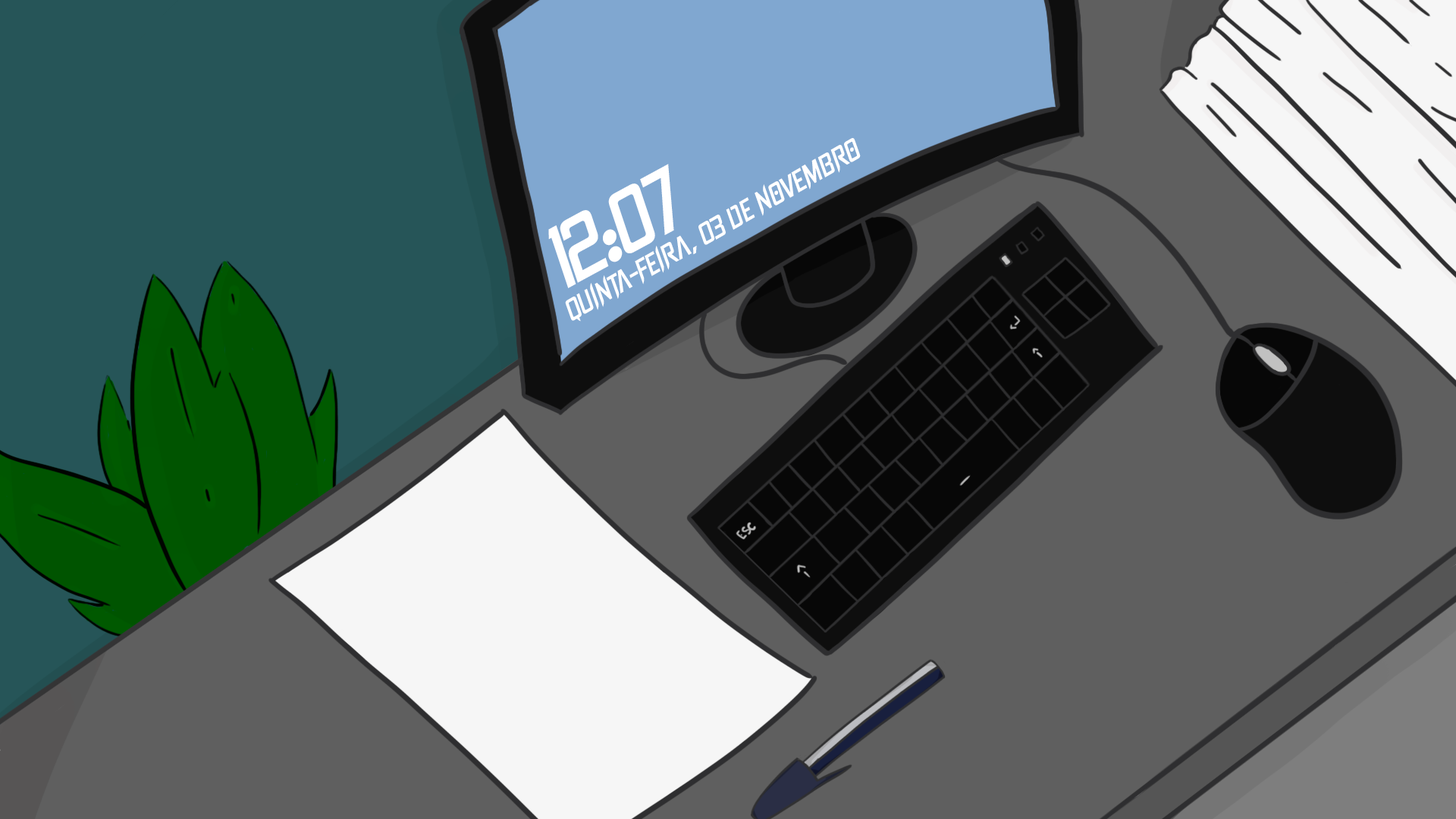
<style>
.page{position:relative;width:1456px;height:819px;background:#5f5f5f}
.page>*{position:absolute;margin:0}
.t1{font:20.4px "IntoTheVoid";color:#ffffff;font-style:italic}
.t2{font:55.3px "IntoTheVoid";color:#ffffff}
.t3{font:59.5px "IntoTheVoid";color:#ffffff;font-style:italic}
</style>
<div class="page">
<p class="t1" style="left:565px;top:138px;width:296px;height:184px;rotate:-30deg"><span class="t2"><br></span>Quinta-Feira, 03 de novembro</p>
<p class="t3" style="left:548px;top:164px;width:126px;height:124px;rotate:-28deg">12:07</p>
</div>
